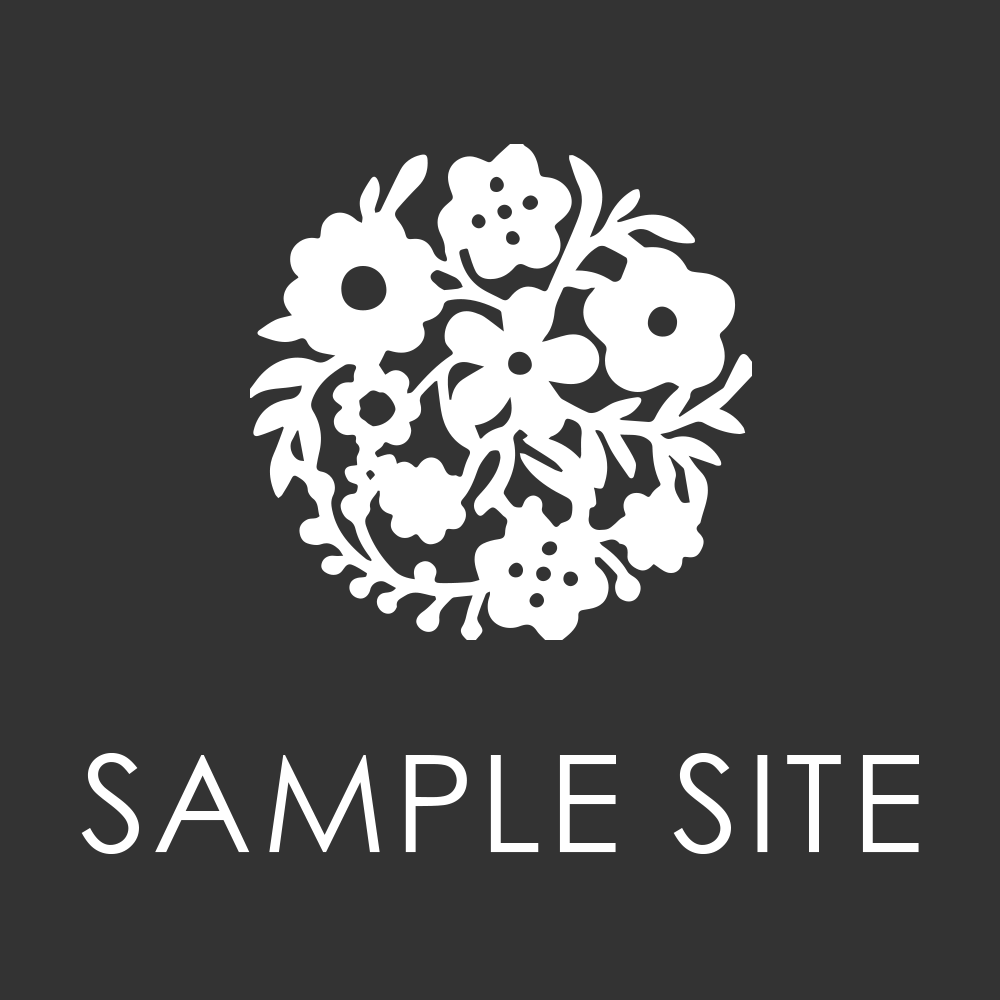
<style>
.page{position:relative;width:1000px;height:1000px;background:#333333}
.page>*{position:absolute;margin:0}
.t1{font:135.1px "CenturyGothic";letter-spacing:0.05em;color:#ffffff}
</style>
<div class="page">
<p class="t1" style="left:81px;top:753px;width:838px;height:101px">SAMPLE SITE</p>
</div>
